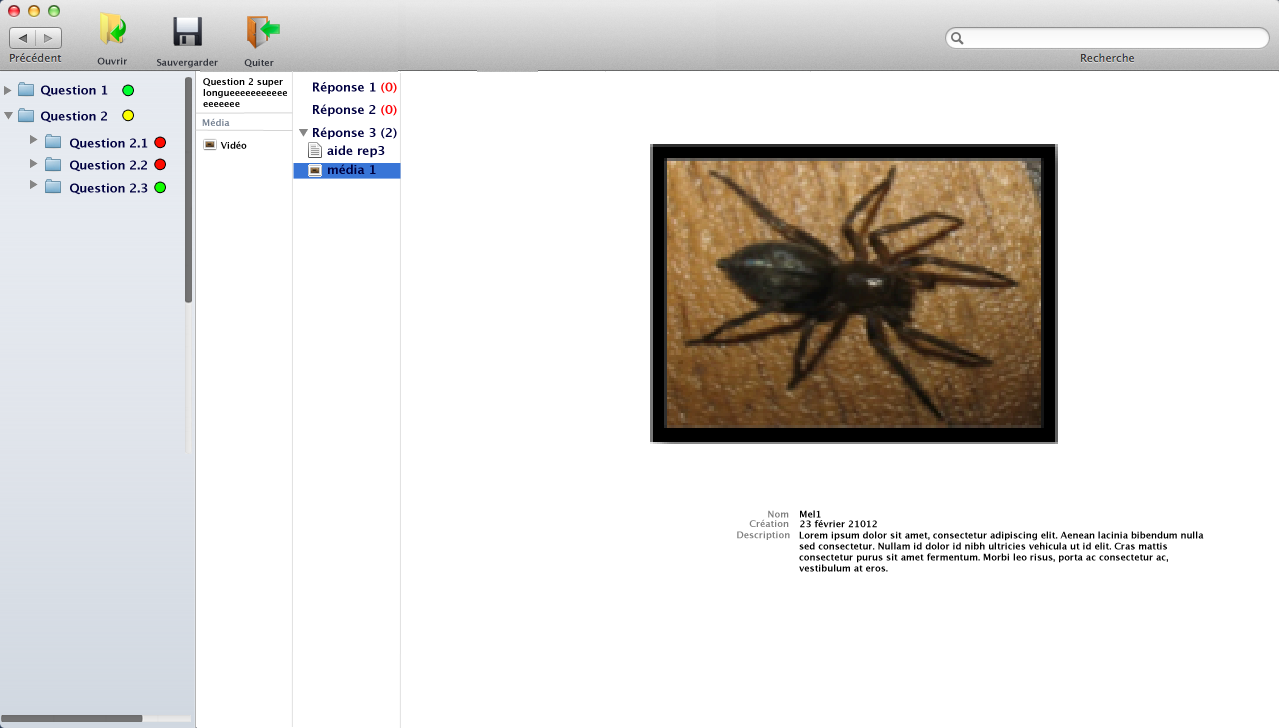
<style>
.page{position:relative;width:1279px;height:728px;background:#ffffff}
.page>*{position:absolute;margin:0}
.t1{font:9px "LucidaGrande-Bold";color:#30333b}
.t2{font:9px/11px "LucidaGrande-Bold";color:#000000}
.t3{font:12px "LucidaGrande-Bold";color:#000040}
.t4{font:12px "LucidaGrande-Bold";color:#fe0404}
.t5{font:12px "LucidaGrande-Bold";color:#ff0006}
.t6{font:9px "LucidaGrande-Bold";color:#758192}
.t7{font:9px "LucidaGrande-Bold";color:#000000}
.t8{font:9px "LucidaGrande-Bold";color:#808080}
</style>
<div class="page">
<p class="t1" style="left:97px;top:57px;width:30px;height:8px">Ouvrir</p>
<p class="t1" style="left:157px;top:58px;width:61px;height:10px">Sauvergarder</p>
<p class="t1" style="left:244px;top:59px;width:30px;height:9px">Quiter</p>
<p class="t2" style="left:203px;top:78px;width:84px;height:29px">Question 2 super <br>longueeeeeeeeeee<br>eeeeeee</p>
<p class="t3" style="left:41px;top:85px;width:67px;height:12px">Question 1</p>
<p class="t3" style="left:313px;top:82px;width:84px;height:12px">Réponse 1 <span class="t4">(0)</span></p>
<p class="t3" style="left:41px;top:111px;width:66px;height:12px">Question 2</p>
<p class="t3" style="left:313px;top:104px;width:84px;height:13px">Réponse 2 <span class="t5">(0)</span></p>
<p class="t6" style="left:202px;top:118px;width:28px;height:8px">Média</p>
<p class="t3" style="left:313px;top:127px;width:84px;height:13px">Réponse 3 (2)</p>
<p class="t3" style="left:70px;top:138px;width:78px;height:12px">Question 2.1</p>
<p class="t7" style="left:220px;top:141px;width:27px;height:8px">Vidéo</p>
<p class="t3" style="left:327px;top:145px;width:58px;height:13px">aide rep3</p>
<p class="t3" style="left:70px;top:160px;width:77px;height:12px">Question 2.2</p>
<p class="t3" style="left:328px;top:164px;width:48px;height:10px">média 1</p>
<p class="t3" style="left:70px;top:183px;width:78px;height:12px">Question 2.3</p>
<p class="t8" style="left:768px;top:510px;width:21px;height:8px">Nom</p>
<p class="t7" style="left:800px;top:510px;width:21px;height:8px">Mel1</p>
<p class="t8" style="left:749px;top:519px;width:40px;height:8px">Création</p>
<p class="t7" style="left:800px;top:520px;width:77px;height:8px">23 février 21012</p>
<p class="t8" style="left:737px;top:531px;width:53px;height:9px">Description</p>
<p class="t2" style="left:799px;top:531px;width:405px;height:41px">Lorem ipsum dolor sit amet, consectetur adipiscing elit. Aenean lacinia bibendum nulla <br>sed consectetur. Nullam id dolor id nibh ultricies vehicula ut id elit. Cras mattis <br>consectetur purus sit amet fermentum. Morbi leo risus, porta ac consectetur ac, <br>vestibulum at eros.</p>
</div>
